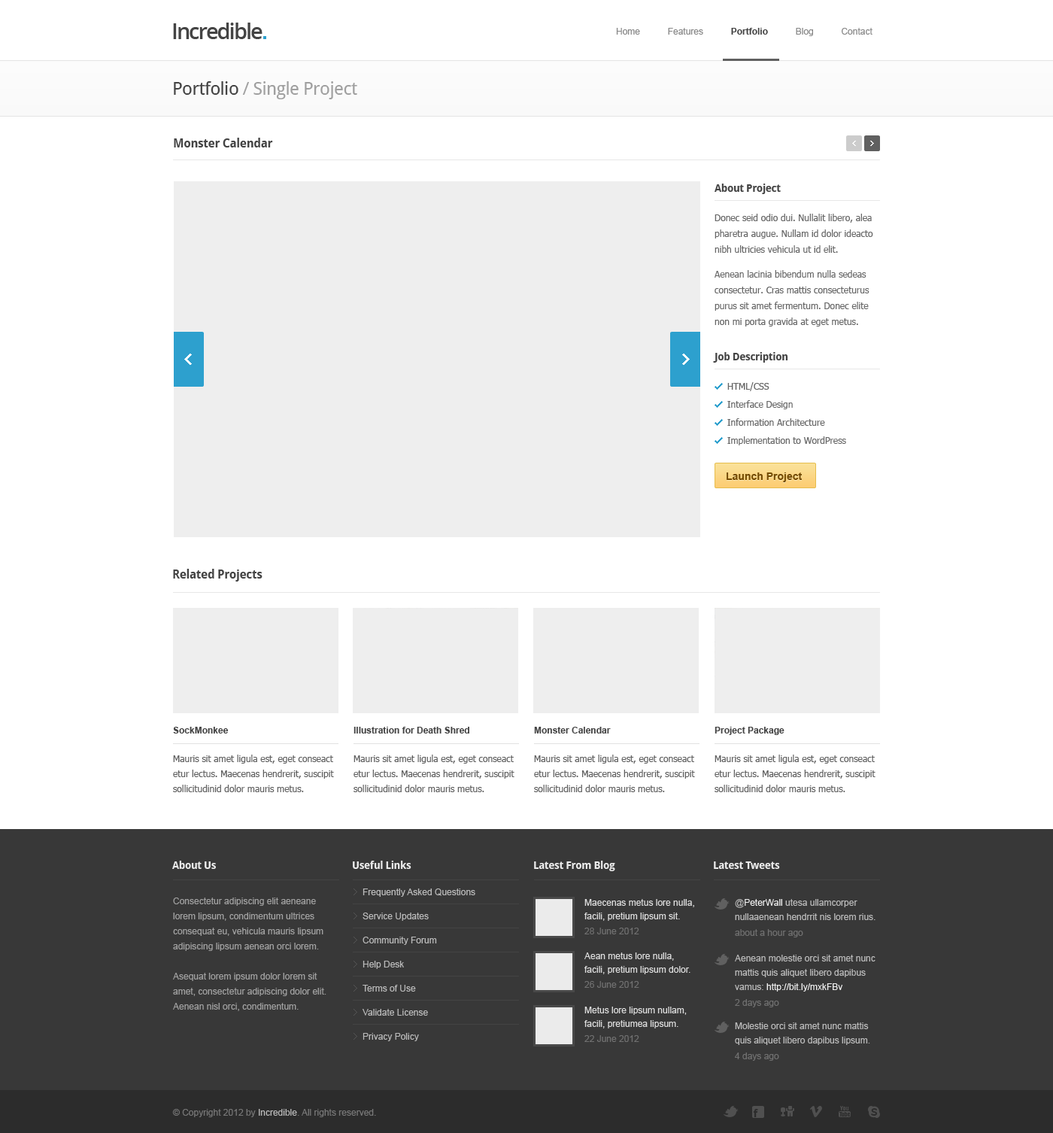
<style>
.page{position:relative;width:1053px;height:1133px;background:#ffffff}
.page>*{position:absolute;margin:0}
.t1{font:21.8px "OpenSans-Semibold";letter-spacing:-0.07em;color:#444444}
.t2{font:9px "ArialMT";color:#888888}
.t3{font:9px "Arial-BoldMT";color:#444444}
.t4{font:18px "DroidSans";letter-spacing:-0.025em;color:#a0a0a0}
.t5{font:18px "DroidSans";letter-spacing:-0.025em;color:#444444}
.t6{font:12px "DroidSans-Bold";letter-spacing:-0.025em;color:#444444}
.t7{font:9px/15.8px "Tahoma";color:#676767}
.t8{font:10.5px/15.8px "DroidSans-Bold";letter-spacing:-0.025em;color:#444444}
.t9{font:9px/13.5px "Tahoma";color:#676767}
.t10{font:10.5px "DroidSans-Bold";letter-spacing:-0.025em;color:#444444}
.t11{font:9px/18px "Tahoma";color:#676767}
.t12{font:10.5px "Arial-BoldMT";color:#754c00}
.t13{font:9px/15px "Tahoma";color:#606060}
.t14{font:9px/13.5px "Arial-BoldMT";color:#444444}
.t15{font:10.5px "DroidSans-Bold";letter-spacing:-0.025em;color:#ffffff}
.t16{font:9px/24.1px "ArialMT";color:#bbbbbb}
.t17{font:9px/15px "ArialMT";color:#a1a1a1}
.t18{font:9px/13.5px "ArialMT";color:#dddddd}
.t19{font:9px/15px "ArialMT";color:#707070}
.t20{font:9px/14.3px "ArialMT";color:#bbbbbb}
.t21{font:9px/14.3px "ArialMT";color:#eeeeee}
.t22{font:9px/15.8px "ArialMT";color:#707070}
.t23{font:9px/14.3px "ArialMT";color:#aaaaaa}
.t24{font:9px "ArialMT";color:#777777}
.t25{font:9px "ArialMT";color:#bbbbbb}
</style>
<div class="page">
<p class="t1" style="left:173px;top:23px;width:89px;height:16px">Incredible</p>
<p class="t2" style="left:616px;top:28px;width:256px;height:8px">Home           Features           <span class="t3">Portfolio           </span>Blog           Contact</p>
<p class="t4" style="left:174px;top:81px;width:183px;height:18px"><span class="t5">Portfolio </span>/ Single Project</p>
<p class="t6" style="left:174px;top:138px;width:99px;height:9px">Monster Calendar</p>
<p class="t7" style="left:714px;top:183px;width:159px;height:143px"><span class="t8">About Project<br><br></span><span class="t9">Donec seid odio dui. Nullalit libero, alea </span>pharetra augue. Nullam id dolor ideacto nibh ultricies vehicula ut id elit.<br> <br>Aenean lacinia bibendum nulla sedeas consectetur. Cras mattis consecteturus purus sit amet fermentum. Donec elite non mi porta gravida at eget metus.</p>
<p class="t10" style="left:713px;top:352px;width:75px;height:10px">Job Description</p>
<p class="t11" style="left:727px;top:382px;width:119px;height:63px">HTML/CSS<br>Interface Design<br>Information Architecture<br>Implementation to WordPress</p>
<p class="t12" style="left:726px;top:472px;width:76px;height:10px">Launch Project</p>
<p class="t6" style="left:173px;top:569px;width:89px;height:12px">Related Projects</p>
<p class="t13" style="left:173px;top:726px;width:161px;height:66px"><span class="t14">SockMonkee<br><br></span>Mauris sit amet ligula est, eget conseact etur lectus. Maecenas hendrerit, suscipit sollicitudinid dolor mauris metus.</p>
<p class="t13" style="left:353px;top:726px;width:161px;height:66px"><span class="t14">Illustration for Death Shred<br><br></span>Mauris sit amet ligula est, eget conseact etur lectus. Maecenas hendrerit, suscipit sollicitudinid dolor mauris metus.</p>
<p class="t13" style="left:534px;top:726px;width:161px;height:66px"><span class="t14">Monster Calendar<br><br></span>Mauris sit amet ligula est, eget conseact etur lectus. Maecenas hendrerit, suscipit sollicitudinid dolor mauris metus.</p>
<p class="t13" style="left:714px;top:726px;width:161px;height:66px"><span class="t14">Project Package<br><br></span>Mauris sit amet ligula est, eget conseact etur lectus. Maecenas hendrerit, suscipit sollicitudinid dolor mauris metus.</p>
<p class="t15" style="left:172px;top:860px;width:44px;height:9px;opacity:0.9">About Us</p>
<p class="t15" style="left:353px;top:860px;width:58px;height:9px;opacity:0.9">Useful Links</p>
<p class="t15" style="left:534px;top:860px;width:81px;height:11px;opacity:0.9">Latest From Blog</p>
<p class="t15" style="left:714px;top:861px;width:66px;height:8px;opacity:0.9">Latest Tweets</p>
<p class="t16" style="left:362px;top:888px;width:113px;height:153px">Frequently Asked Questions<br>Service Updates<br>Community Forum<br>Help Desk<br>Terms of Use<br>Validate License<br>Privacy Policy</p>
<p class="t17" style="left:173px;top:897px;width:153px;height:114px">Consectetur adipiscing elit aeneane lorem lipsum, condimentum ultrices consequat eu, vehicula mauris lipsum adipiscing lipsum aenean orci lorem.<br> <br>Asequat lorem ipsum dolor lorem sit amet, consectetur adipiscing dolor elit. Aenean nisl orci, condimentum.</p>
<p class="t18" style="left:584px;top:899px;width:110px;height:35px">Maecenas metus lore nulla, facili, pretium lipsum sit.<br><span class="t19">28 June 2012</span></p>
<p class="t20" style="left:735px;top:899px;width:140px;height:38px">@<span class="t21">PeterWall </span>utesa ullamcorper nullaaenean hendrrit nis lorem rius.<br><span class="t22">about a hour ago</span></p>
<p class="t18" style="left:584px;top:952px;width:106px;height:35px">Aean metus lore nulla, facili, pretium lipsum dolor.<br><span class="t19">26 June 2012</span></p>
<p class="t20" style="left:735px;top:954px;width:140px;height:53px">Aenean molestie orci sit amet nunc mattis quis aliquet libero dapibus vamus: <span class="t21">http://bit.ly/mxkFBv<br></span><span class="t22">2 days ago</span></p>
<p class="t18" style="left:584px;top:1006px;width:103px;height:36px">Metus lore lipsum nullam, facili, pretiumea lipsum.<br><span class="t19">22 June 2012</span></p>
<p class="t20" style="left:735px;top:1022px;width:135px;height:38px">Molestie orci sit amet nunc mattis quis aliquet libero dapibus lipsum<span class="t23">.<br></span><span class="t22">4 days ago</span></p>
<p class="t24" style="left:172px;top:1109px;width:204px;height:8px">© Copyright 2012 by <span class="t25">Incredible</span>. All rights reserved.</p>
</div>
